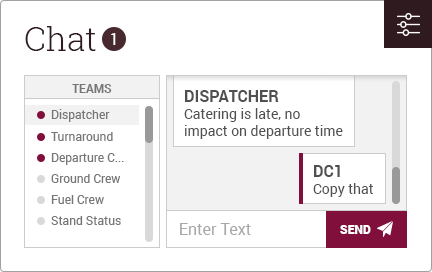
<style>
.page{position:relative;width:432px;height:272px;background:#ffffff}
.page>*{position:absolute;margin:0}
.t1{font:33px "RobotoSlab-Light";color:#2f1b1f}
.t2{font:16.4px "Roboto-Regular";color:#ffffff}
.t3{font:12px "Roboto-Bold";color:#767676;text-transform:uppercase}
.t4{font:16px "Roboto-Bold";color:#505050;text-transform:uppercase}
.t5{font:12px "Roboto-Regular";color:#767676}
.t6{font:14px "Roboto-Regular";color:#505050}
.t7{font:16px "Roboto-Regular";color:#a8a8a8}
.t8{font:12px "Roboto-Black";color:#ffffff;text-transform:uppercase}
</style>
<div class="page">
<p class="t1" style="left:25px;top:26px;width:71px;height:25px">Chat</p>
<p class="t2" style="left:111px;top:33px;width:5px;height:12px">1</p>
<p class="t3" style="left:72px;top:84px;width:40px;height:9px">teams</p>
<p class="t4" style="left:185px;top:90px;width:94px;height:12px">Dispatcher</p>
<p class="t5" style="left:51px;top:109px;width:59px;height:13px">Dispatcher</p>
<p class="t6" style="left:184px;top:108px;width:159px;height:31px">Catering is late, no <br>impact on departure time</p>
<p class="t5" style="left:51px;top:132px;width:62px;height:9px">Turnaround</p>
<p class="t5" style="left:51px;top:153px;width:73px;height:12px">Departure C...</p>
<p class="t5" style="left:51px;top:174px;width:70px;height:9px">Ground Crew</p>
<p class="t4" style="left:314px;top:165px;width:26px;height:12px">DC1</p>
<p class="t6" style="left:313px;top:183px;width:60px;height:14px">Copy that</p>
<p class="t5" style="left:51px;top:195px;width:53px;height:9px">Fuel Crew</p>
<p class="t5" style="left:51px;top:216px;width:70px;height:9px">Stand Status</p>
<p class="t7" style="left:180px;top:223px;width:71px;height:12px">Enter Text</p>
<p class="t8" style="left:340px;top:225px;width:31px;height:9px">Send</p>
</div>
